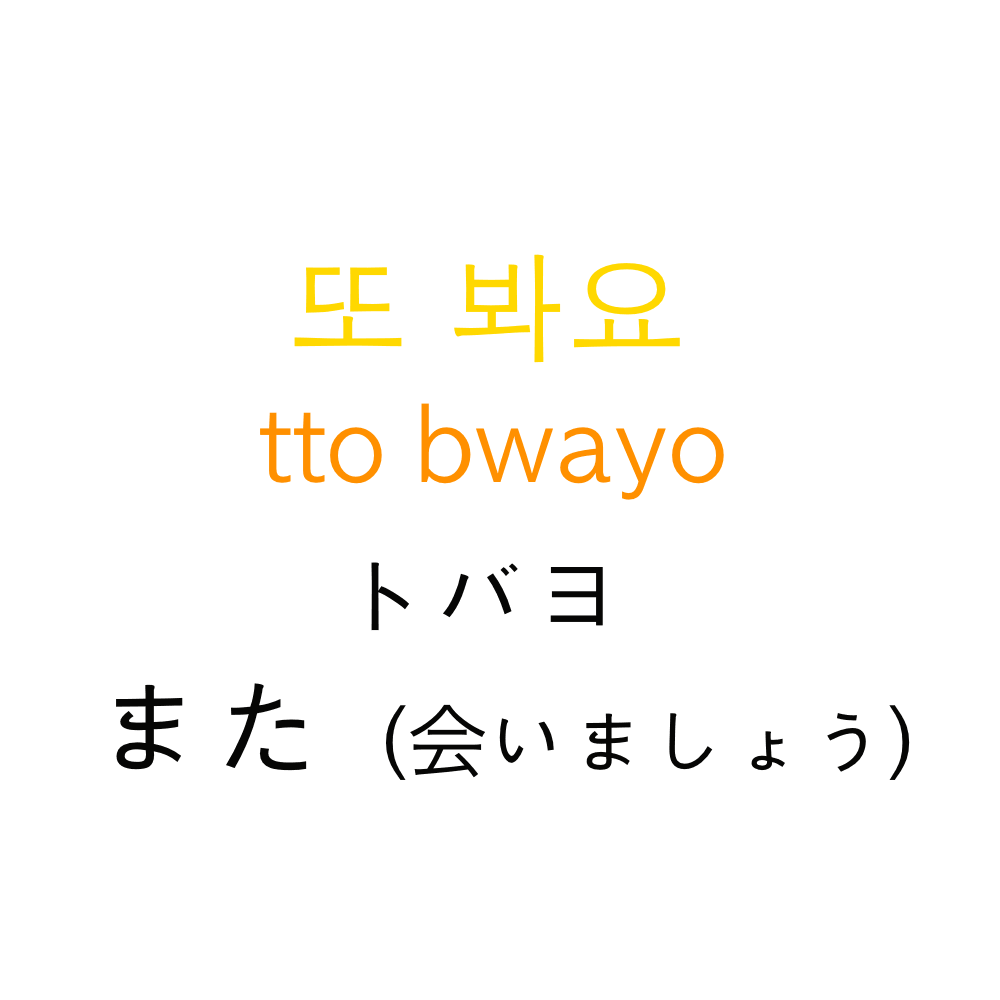
<style>
.page{position:relative;width:1000px;height:1000px;background:#ffffff}
.page>*{position:absolute;margin:0}
.t1{font:120px "AppleGothic";color:#ffd800}
.t2{font:100px "AppleGothic";color:#ff9000}
.t3{font:100px "AppleGothic";color:#060605}
.t4{font:80px "AppleGothic";color:#060605}
.t5{font:120px "AppleGothic";color:#060605}
.t6{font:80px "HiraKakuProN-W3";color:#060605}
</style>
<div class="page">
<p class="t1" style="left:294px;top:254px;width:386px;height:109px">또 봐요</p>
<p class="t2" style="left:260px;top:403px;width:464px;height:97px">tto bwayo</p>
<p class="t3" style="left:371px;top:562px;width:232px;height:69px">トバヨ</p>
<p class="t4" style="left:116px;top:683px;width:794px;height:97px"><span class="t5">また</span>（<span class="t6">会</span>いましょう）</p>
</div>
